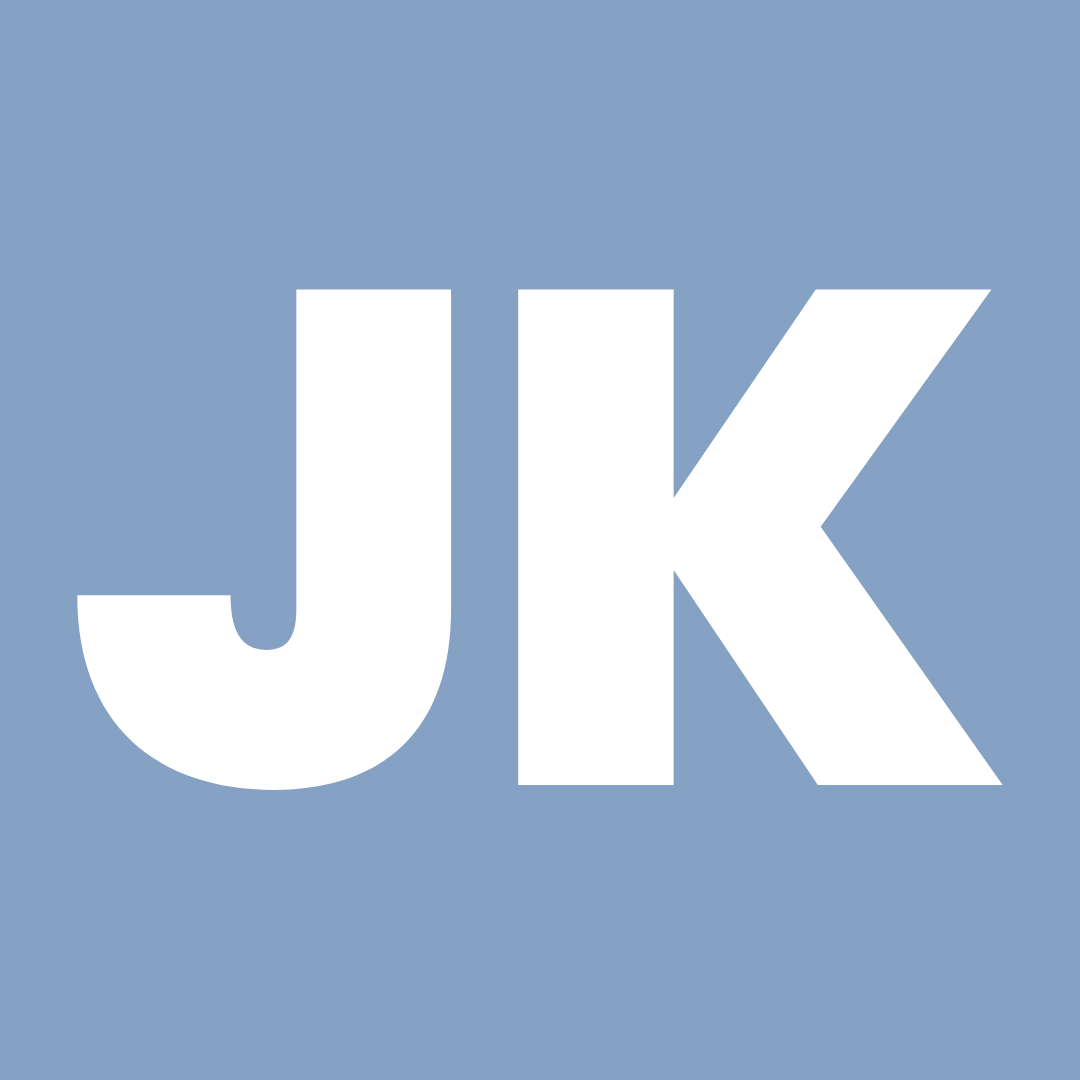
<style>
.page{position:relative;width:1080px;height:1080px;background:#85a1c4}
.page>*{position:absolute;margin:0}
.t1{font:700px "Poppins-Black";color:#ffffff}
</style>
<div class="page">
<p class="t1" style="left:77px;top:289px;width:926px;height:501px">JK</p>
</div>
